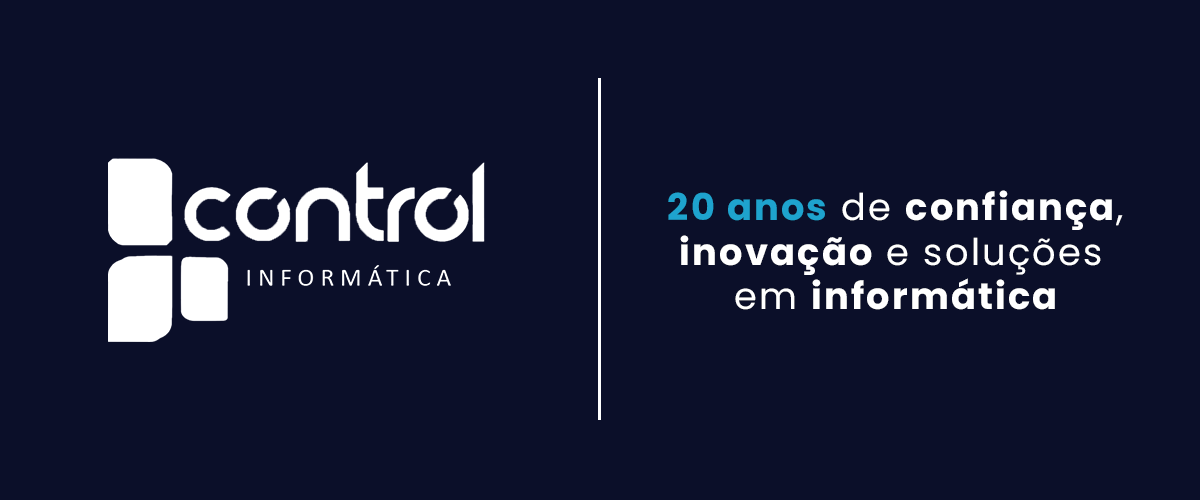
<style>
.page{position:relative;width:1200px;height:500px;background:#0b0f29}
.page>*{position:absolute;margin:0}
.t1{font:36.7px "Poppins-Regular";letter-spacing:0.06em;color:#ffffff}
.t2{font:36.7px "Poppins-Bold";letter-spacing:0.06em;color:#1ea3ce}
.t3{font:36.7px "Poppins-Bold";letter-spacing:0.06em;color:#ffffff}
</style>
<div class="page">
<p class="t1" style="left:668px;top:190px;width:455px;height:120px;text-align:center"><span class="t2">20 anos</span> de <span class="t3">confiança</span>,<br><span class="t3">inovação</span> e soluções <br>em <span class="t3">informática</span></p>
</div>
